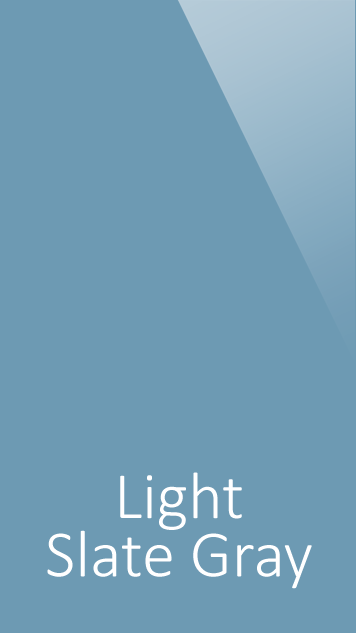
<style>
.page{position:relative;width:356px;height:633px;background:#6d9ab3}
.page>*{position:absolute;margin:0}
.t1{font:66.7px/58.3px "Calibri-Light";color:#ffffff}
.t2{font:66.7px/66.7px "Calibri-Light";color:#ffffff}
</style>
<div class="page">
<p class="t1" style="left:47px;top:472px;width:265px;height:117px;text-align:center"><span class="t2">Light<br></span>Slate Gray</p>
</div>
